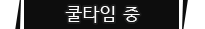
<style>
.page{position:relative;width:205px;height:29px;background:#0d0d0d}
.page>*{position:absolute;margin:0}
.t1{font:18px "HCRDotum";color:#ffffff}
</style>
<div class="page">
<p class="t1" style="left:65px;top:6px;width:75px;height:17px">쿨타임 중</p>
</div>
